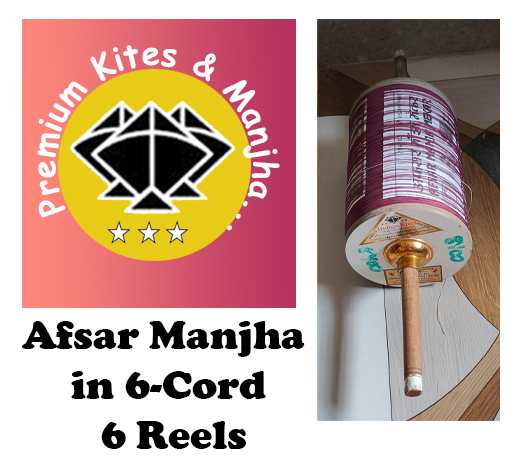
<style>
.page{position:relative;width:522px;height:462px;background:#ffffff}
.page>*{position:absolute;margin:0}
.t1{font:41.7px "CooperBlack";color:#000000}
</style>
<div class="page">
<p class="t1" style="left:22px;top:321px;width:283px;height:128px;text-align:center">Afsar Manjha <br>in 6-Cord<br> 6 Reels</p>
</div>
